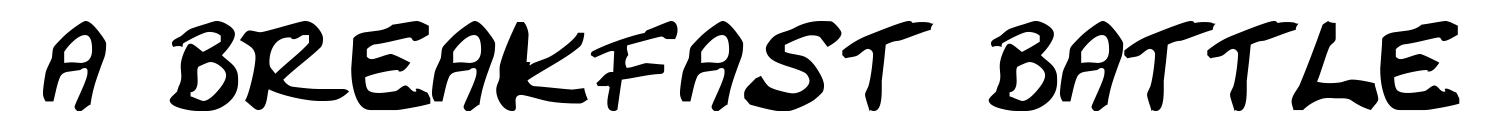
<style>
.page{position:relative;width:1508px;height:137px;background:#ffffff}
.page>*{position:absolute;margin:0}
.t1{font:125px "CrackedJohnnie";color:#000000}
</style>
<div class="page">
<p class="t1" style="left:43px;top:21px;width:1417px;height:90px">a breakfast battle</p>
</div>
